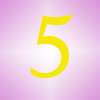
<style>
.page{position:relative;width:100px;height:100px}
.page>*{position:absolute;margin:0}
.t1{font:83.3px "LucidaHandwriting-Italic";color:#f5e70b}
</style>
<div class="page">
<p class="t1" style="left:30px;top:14px;width:43px;height:64px">5</p>
</div>
